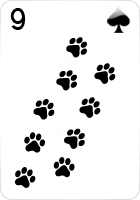
<style>
.page{position:relative;width:140px;height:200px;background:#ffffff}
.page>*{position:absolute;margin:0}
.t1{font:26px "CardCharacters";color:#000000}
</style>
<div class="page">
<p class="t1" style="left:10px;top:8px;width:16px;height:22px">9</p>
</div>
